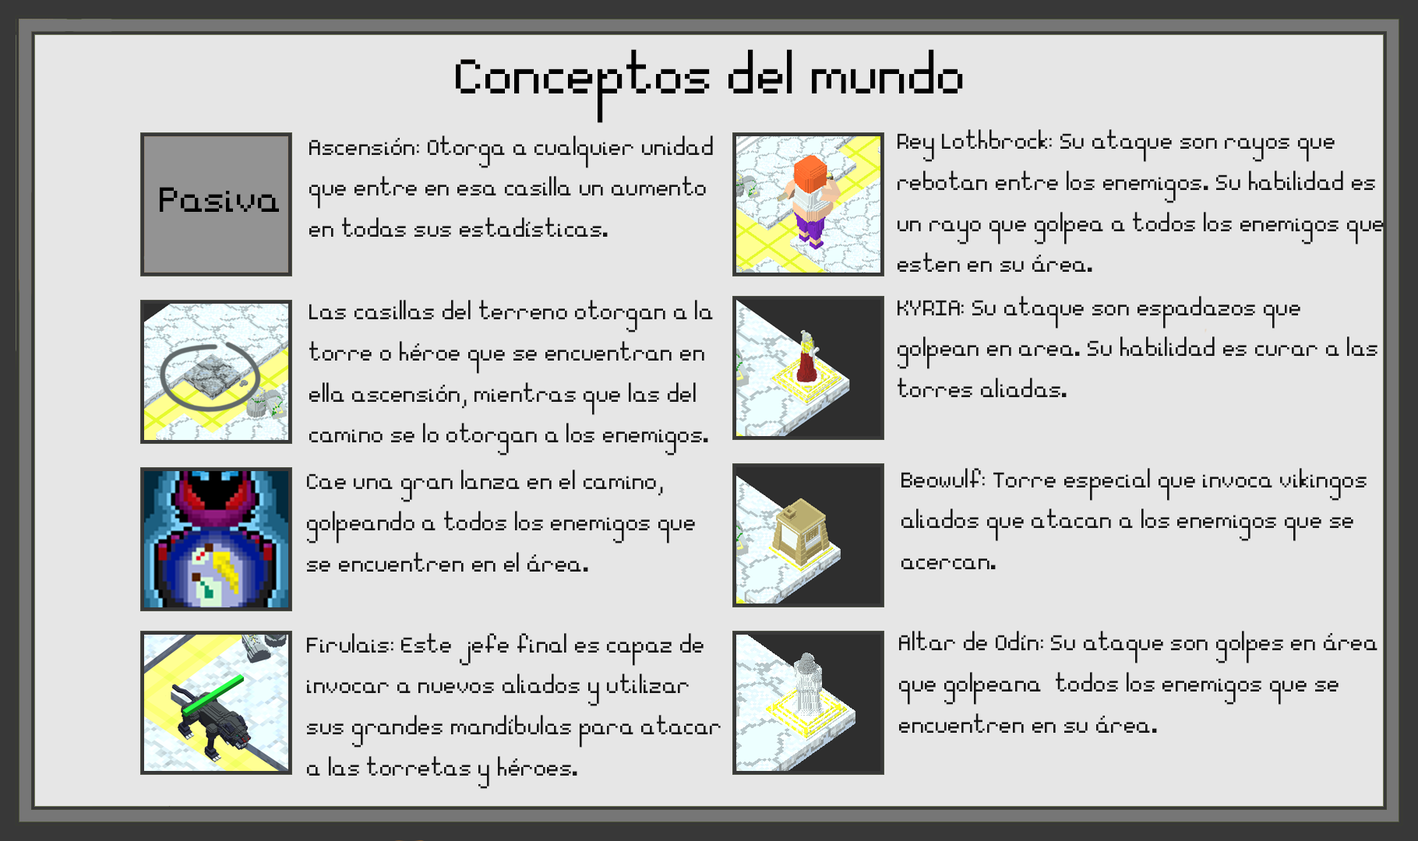
<style>
.page{position:relative;width:1418px;height:841px;background:#e6e6e6}
.page>*{position:absolute;margin:0}
.t1{font:77.9px "Essential";color:#000000}
.t2{font:34.3px "Essential";color:#161616}
.t3{font:56.1px "Essential";color:#000000}
</style>
<div class="page">
<p class="t1" style="left:456px;top:49px;width:507px;height:74px">Conceptos del mundo</p>
<p class="t2" style="left:309px;top:136px;width:404px;height:101px">Ascensión: Otorga a cualquier unidad<br>que entre en esa casilla un aumento <br>en todas sus estadísticas.</p>
<p class="t2" style="left:897px;top:129px;width:486px;height:143px">Rey Lothbrock: Su ataque son rayos que <br>rebotan entre los enemigos. Su habilidad es <br>un rayo que golpea a todos los enemigos que<br>esten en su área.</p>
<p class="t3" style="left:160px;top:187px;width:119px;height:25px">Pasiva</p>
<p class="t2" style="left:309px;top:300px;width:404px;height:156px">Las casillas del terreno otorgan a la<br>torre o héroe que se encuentran en <br>ella ascensión, mientras que las del<br>camino se lo otorgan a los enemigos.</p>
<p class="t2" style="left:897px;top:296px;width:480px;height:101px">KYRIA: Su ataque son espadazos que <br>golpean en area. Su habilidad es curar a las<br>torres aliadas.</p>
<p class="t2" style="left:307px;top:470px;width:388px;height:102px">Cae una gran lanza en el camino, <br>golpeando a todos los enemigos que <br>se encuentren en el área.</p>
<p class="t2" style="left:901px;top:468px;width:465px;height:101px">Beowulf: Torre especial que invoca vikingos<br>aliados que atacan a los enemigos que se<br>acercan.</p>
<p class="t2" style="left:307px;top:633px;width:413px;height:156px">Firulais: Este jefe final es capaz de <br>invocar a nuevos aliados y utilizar <br>sus grandes mandíbulas para atacar <br>a las torretas y héroes.</p>
<p class="t2" style="left:899px;top:631px;width:478px;height:102px">Altar de Odín: Su ataque son golpes en área<br>que golpeana  todos los enemigos que se <br>encuentren en su área.</p>
</div>
